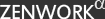
<style>
.page{position:relative;width:105px;height:19px;background:#333333}
.page>*{position:absolute;margin:0}
.t1{font:22.2px "EstrangeloEdessa";letter-spacing:-0.04em;color:#ffffff}
</style>
<div class="page">
<p class="t1" style="left:0px;top:4px;width:95px;height:16px">ZENWORK</p>
</div>
